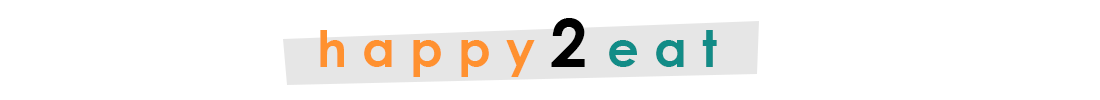
<style>
.page{position:relative;width:1100px;height:100px;background:#ffffff}
.page>*{position:absolute;margin:0}
.t1{font:12px "CenturyGothic-Bold";letter-spacing:0.3em;color:#ff9130}
.t2{font:66.7px "CenturyGothic-Bold";letter-spacing:0.3em;color:#000000}
.t3{font:12px "CenturyGothic-Bold";letter-spacing:0.3em;color:#128c87}
</style>
<div class="page">
<p class="t1" style="left:320px;top:18px;width:397px;height:59px">happy<span class="t2">2</span><span class="t3">eat</span></p>
</div>
